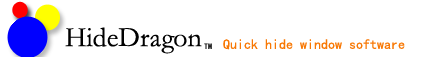
<style>
.page{position:relative;width:425px;height:57px;background:#ffffff}
.page>*{position:absolute;margin:0}
.t1{font:28px "STFangsong";color:#000000}
.t2{font:14px "SimHei";color:#f87804}
.t3{font:8px "SimHei"}
</style>
<div class="page">
<p class="t1" style="left:65px;top:27px;width:137px;height:27px">HideDragon</p>
<p class="t2" style="left:223px;top:39px;width:182px;height:11px">Quick hide window software</p>
<p class="t3" style="left:204px;top:43px;width:8px;height:6px">TM</p>
</div>
